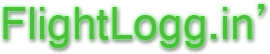
<style>
.page{position:relative;width:270px;height:54px;background:#ffffff}
.page>*{position:absolute;margin:0}
.t1{font:48px "Shruti";color:#4cbe3c}
</style>
<div class="page">
<p class="t1" style="left:3px;top:4px;width:262px;height:44px">FlightLogg.in’</p>
</div>
